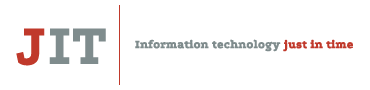
<style>
.page{position:relative;width:370px;height:90px;background:#ffffff}
.page>*{position:absolute;margin:0}
.t1{font:60px "Podkova-Bold";letter-spacing:0.02em;color:#7f8c8d;text-transform:uppercase}
.t2{font:60px "Podkova-Bold";letter-spacing:0.02em;color:#c0392b;text-transform:uppercase}
.t3{font:12px "Podkova-Bold";letter-spacing:0.02em;color:#7f8c8d;font-weight:bold}
.t4{font:12px "Podkova-Bold";letter-spacing:0.02em;color:#c0392b;font-weight:bold}
</style>
<div class="page">
<p class="t1" style="left:16px;top:28px;width:90px;height:38px"><span class="t2">j</span>it</p>
<p class="t3" style="left:135px;top:39px;width:218px;height:13px">Information technology <span class="t4">just in time</span></p>
</div>
